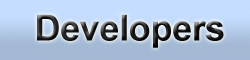
<style>
.page{position:relative;width:250px;height:60px}
.page>*{position:absolute;margin:0}
.t1{font:36px "Arial-BoldMT";letter-spacing:-0.01em}
</style>
<div class="page">
<p class="t1" style="left:37px;top:14px;width:187px;height:34px">Developers</p>
</div>
